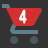
<style>
.page{position:relative;width:48px;height:48px;background:#333333}
.page>*{position:absolute;margin:0}
.t1{font:18px "ArialRoundedMTBold";letter-spacing:0.12em;color:#ffffff;font-weight:bold;scale:0.67 1}
</style>
<div class="page">
<p class="t1" style="left:19px;top:9px;width:8px;height:15px">4</p>
</div>
